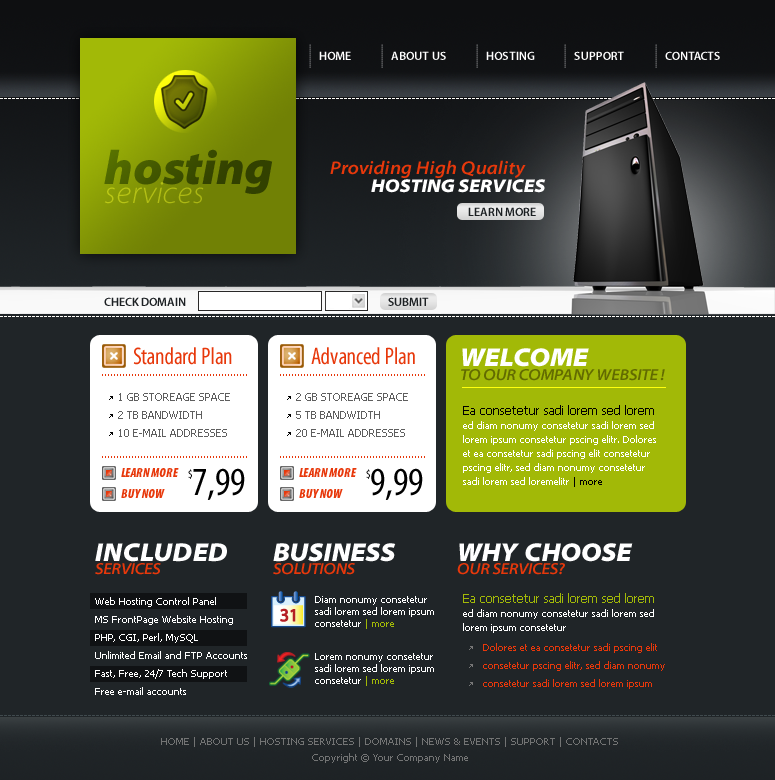
<style>
.page{position:relative;width:775px;height:780px;background:#202528}
.page>*{position:absolute;margin:0}
.t1{font:8.8px "MyriadPro-Semibold"}
.t2{font:12px "MyriadPro-Semibold";color:#ffffff}
.t3{font:31.4px/19.1px "MyriadPro-LightSemiExtIt";color:#3a4c00}
.t4{font:47.7px/19.1px "MyriadPro-BlackSemiExtIt";color:#3a4c00}
.t5{font:18.7px "MyriadPro-SemiboldSemiExtIt";color:#e7380b}
.t6{font:18.7px "MyriadPro-BlackSemiExtIt";color:#ffffff}
.t7{font:12px "MyriadPro-Semibold";color:#1c2023}
.t8{font:24px "MyriadPro-Cond";color:#e7380b}
.t9{font:26px "MyriadPro-BlackSemiExtIt";color:#ffffff}
.t10{font:10px "Tahoma";color:#e7380b}
.t11{font:16px "MyriadPro-SemiboldSemiExtIt";color:#626b00}
.t12{font:11px/18px "Tahoma";color:#5e5e5e}
.t13{font:10px/14px "Tahoma";color:#ffffff}
.t14{font:12px/14px "Tahoma";color:#000000}
.t15{font:10px/14px "Tahoma";color:#000000}
.t16{font:13px "MyriadPro-BlackCondIt";color:#e7380b}
.t17{font:12px "MyriadPro-Cond";color:#000000}
.t18{font:40px "MyriadPro-Cond";color:#000000}
.t19{font:16px "MyriadPro-SemiboldSemiExtIt";color:#e7380b}
.t20{font:12px/14px "Tahoma";color:#a2b907}
.t21{font:10px/18px "Tahoma";color:#ffffff}
.t22{font:10px/12px "Tahoma";color:#ffffff}
.t23{font:10px/12px "Tahoma";color:#a2b907}
.t24{font:10px/18px "Tahoma";color:#e7380b}
.t25{font:10px/16px "Tahoma";color:#737474}
</style>
<div class="page">
<p class="t1" style="left:309px;top:44px;width:2px;height:24px;rotate:90deg">............</p>
<p class="t2" style="left:319px;top:51px;width:32px;height:9px">HOME</p>
<p class="t1" style="left:381px;top:44px;width:2px;height:24px;rotate:90deg">............</p>
<p class="t2" style="left:391px;top:51px;width:55px;height:9px">ABOUT US</p>
<p class="t1" style="left:476px;top:44px;width:2px;height:24px;rotate:90deg">............</p>
<p class="t2" style="left:486px;top:51px;width:49px;height:9px">HOSTING</p>
<p class="t1" style="left:564px;top:44px;width:2px;height:24px;rotate:90deg">............</p>
<p class="t2" style="left:574px;top:51px;width:50px;height:9px">SUPPORT</p>
<p class="t1" style="left:655px;top:44px;width:2px;height:24px;rotate:90deg">............</p>
<p class="t2" style="left:665px;top:51px;width:55px;height:9px">CONTACTS</p>
<p class="t3" style="left:104px;top:149px;width:169px;height:55px"><span class="t4">hosting<br></span>services</p>
<p class="t5" style="left:330px;top:160px;width:196px;height:18px">Providing High Quality</p>
<p class="t6" style="left:371px;top:179px;width:175px;height:14px">HOSTING SERVICES</p>
<p class="t7" style="left:468px;top:207px;width:68px;height:9px">LEARN MORE</p>
<p class="t7" style="left:104px;top:297px;width:82px;height:9px">CHECK DOMAIN</p>
<p class="t7" style="left:388px;top:297px;width:41px;height:9px">SUBMIT</p>
<p class="t8" style="left:133px;top:347px;width:99px;height:18px">Standard Plan</p>
<p class="t8" style="left:311px;top:347px;width:104px;height:18px">Advanced Plan</p>
<p class="t9" style="left:462px;top:348px;width:127px;height:19px">WELCOME</p>
<p class="t10" style="left:102px;top:374px;width:145px;height:2px">.................................................</p>
<p class="t10" style="left:280px;top:374px;width:145px;height:2px">.................................................</p>
<p class="t11" style="left:461px;top:369px;width:204px;height:12px">TO OUR COMPANY WEBSITE !</p>
<p class="t12" style="left:118px;top:393px;width:112px;height:44px">1 GB STOREAGE SPACE<br>2 TB BANDWIDTH<br>10 E-MAIL ADDRESSES</p>
<p class="t12" style="left:296px;top:393px;width:112px;height:44px">2 GB STOREAGE SPACE<br>5 TB BANDWIDTH<br>20 E-MAIL ADDRESSES</p>
<p class="t13" style="left:463px;top:405px;width:193px;height:82px"><span class="t14">Ea consetetur sadi lorem sed lorem <br></span>ed diam nonumy consetetur sadi lorem sed lorem ipsum consetetur pscing elitr. Dolores et ea consetetur sadi pscing elit consetetur pscing elitr, sed diam nonumy consetetur sadi lorem sed loremelitr<span class="t15"> | more</span></p>
<p class="t10" style="left:102px;top:456px;width:145px;height:2px">.................................................</p>
<p class="t10" style="left:280px;top:456px;width:145px;height:2px">.................................................</p>
<p class="t16" style="left:121px;top:468px;width:58px;height:9px">LEARN MORE</p>
<p class="t17" style="left:188px;top:469px;width:4px;height:10px">$</p>
<p class="t18" style="left:193px;top:468px;width:52px;height:32px">7,99</p>
<p class="t16" style="left:299px;top:468px;width:58px;height:9px">LEARN MORE</p>
<p class="t17" style="left:366px;top:469px;width:4px;height:10px">$</p>
<p class="t18" style="left:371px;top:468px;width:52px;height:32px">9,99</p>
<p class="t16" style="left:121px;top:489px;width:44px;height:9px">BUY NOW</p>
<p class="t16" style="left:299px;top:489px;width:44px;height:9px">BUY NOW</p>
<p class="t9" style="left:95px;top:543px;width:132px;height:19px">INCLUDED</p>
<p class="t9" style="left:273px;top:543px;width:123px;height:19px">BUSINESS</p>
<p class="t9" style="left:459px;top:543px;width:174px;height:19px">WHY CHOOSE</p>
<p class="t19" style="left:95px;top:563px;width:66px;height:12px">SERVICES</p>
<p class="t19" style="left:273px;top:563px;width:82px;height:12px">SOLUTIONS</p>
<p class="t19" style="left:457px;top:563px;width:108px;height:12px">OUR SERVICES?</p>
<p class="t13" style="left:463px;top:593px;width:191px;height:40px"><span class="t20">Ea consetetur sadi lorem sed lorem <br></span>ed diam nonumy consetetur sadi lorem sed lorem ipsum consetetur</p>
<p class="t21" style="left:95px;top:597px;width:152px;height:98px">Web Hosting Control Panel<br>MS FrontPage Website Hosting<br>PHP, CGI, Perl, MySQL<br>Unlimited Email and FTP Accounts<br>Fast, Free, 24/7 Tech Support<br>Free e-mail accounts</p>
<p class="t22" style="left:315px;top:596px;width:119px;height:33px">Diam nonumy consetetur sadi lorem sed lorem ipsum consetetur<span class="t23"> | more</span></p>
<p class="t22" style="left:315px;top:653px;width:119px;height:33px">Lorem nonumy consetetur sadi lorem sed lorem ipsum consetetur<span class="t23"> | more</span></p>
<p class="t24" style="left:483px;top:643px;width:182px;height:46px">Dolores et ea consetetur sadi pscing elit consetetur pscing elitr, sed diam nonumy consetetur sadi lorem sed lorem ipsum</p>
<p class="t25" style="left:161px;top:737px;width:457px;height:26px;text-align:center">HOME | ABOUT US | HOSTING SERVICES | DOMAINS | NEWS &amp; EVENTS | SUPPORT | CONTACTS<br>Copyright © Your Company Name</p>
</div>
